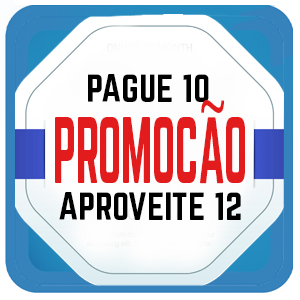
<style>
.page{position:relative;width:300px;height:300px}
.page>*{position:absolute;margin:0}
.t1{font:34.6px "Norwester-Regular";color:#000000;text-transform:uppercase}
.t2{font:82.5px "MyriadPro-Regular";color:#e21c1c;text-transform:uppercase;scale:0.56 1}
.t3{font:82.5px "Norwester-Regular";color:#e21c1c;text-transform:uppercase;scale:0.56 1}
</style>
<div class="page">
<p class="t1" style="left:88px;top:74px;width:121px;height:28px">pague 10</p>
<p class="t2" style="left:201px;top:100px;width:23px;height:13px">~</p>
<p class="t3" style="left:55px;top:117px;width:190px;height:67px">promocao</p>
<p class="t1" style="left:59px;top:192px;width:182px;height:28px">aproveite 12</p>
</div>
